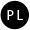
<style>
.page{position:relative;width:30px;height:30px;background:#000000}
.page>*{position:absolute;margin:0}
.t1{font:13.7px "MyriadPro-Regular";letter-spacing:0.2em;color:#ffffff;text-transform:uppercase}
</style>
<div class="page">
<p class="t1" style="left:7px;top:10px;width:16px;height:10px">PL</p>
</div>
